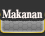
<style>
.page{position:relative;width:45px;height:36px;background:#333333}
.page>*{position:absolute;margin:0}
.t1{font:11px "RyuminPro-ExBold";letter-spacing:-0.08em;color:#fff6f2;font-weight:bold;scale:0.9 1}
</style>
<div class="page">
<p class="t1" style="left:2px;top:9px;width:41px;height:10px">Makanan</p>
</div>
